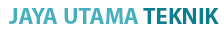
<style>
.page{position:relative;width:224px;height:32px;background:#ffffff}
.page>*{position:absolute;margin:0}
.t1{font:23px "MyriadPro-Bold";color:#44b1c1}
.t2{font:23px "MyriadPro-Bold";color:#078092}
</style>
<div class="page">
<p class="t1" style="left:9px;top:8px;width:210px;height:16px">JAYA UTAMA <span class="t2">TEKNIK</span></p>
</div>
